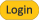
<style>
.page{position:relative;width:39px;height:20px;background:#fec513}
.page>*{position:absolute;margin:0}
.t1{font:12.4px "Calibri";color:#333333}
</style>
<div class="page">
<p class="t1" style="left:6px;top:5px;width:26px;height:11px">Login</p>
</div>
